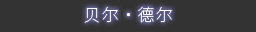
<style>
.page{position:relative;width:256px;height:32px;background:#333333}
.page>*{position:absolute;margin:0}
.t1{font:17px "NotoSansSC-Thin";letter-spacing:0.06em;color:#ffffff}
</style>
<div class="page">
<p class="t1" style="left:84px;top:6px;width:88px;height:17px">贝尔·德尔</p>
</div>
